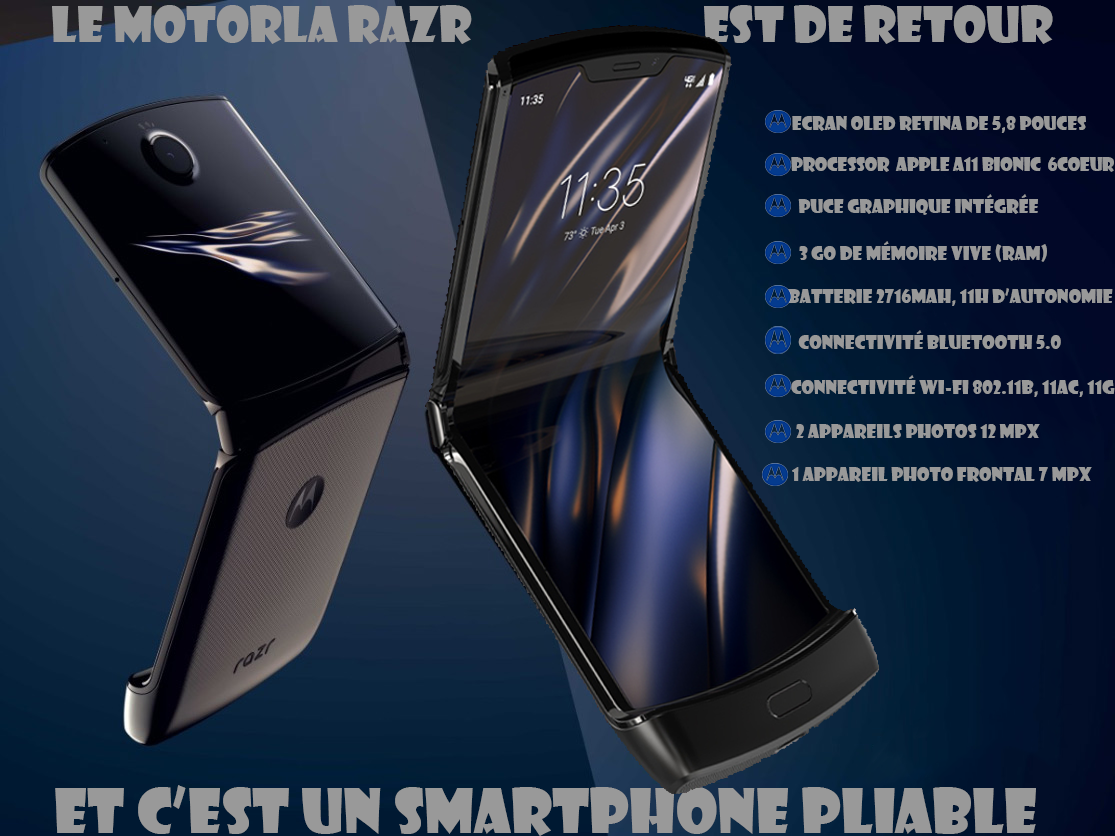
<style>
.page{position:relative;width:1115px;height:836px}
.page>*{position:absolute;margin:0}
.t1{font:48px "ShowcardGothic-Reg";color:#999999}
.t2{font:18px "ShowcardGothic-Reg";color:#999999}
.t3{font:17.6px "ShowcardGothic-Reg";color:#999999}
.t4{font:60px "ShowcardGothic-Reg";color:#999999}
</style>
<div class="page">
<p class="t1" style="left:52px;top:5px;width:1001px;height:39px">Le Motorla RAZR                        est de retour</p>
<p class="t2" style="left:792px;top:116px;width:294px;height:17px">ecran OLED retina de 5,8 pouces</p>
<p class="t3" style="left:791px;top:157px;width:323px;height:15px">Processor  apple A11 BIONIC  6COEUR</p>
<p class="t2" style="left:798px;top:194px;width:240px;height:21px">Puce graphique intégrée</p>
<p class="t2" style="left:799px;top:241px;width:248px;height:21px">3 Go de mémoire vive (RAM)</p>
<p class="t2" style="left:788px;top:288px;width:325px;height:18px">Batterie 2716MAH, 11H D’autonomie</p>
<p class="t2" style="left:798px;top:330px;width:263px;height:19px">Connectivité Bluetooth 5.0</p>
<p class="t2" style="left:791px;top:375px;width:324px;height:22px">Connectivité Wi-Fi 802.11b, 11ac, 11g</p>
<p class="t2" style="left:796px;top:424px;width:244px;height:15px">2 appareils photos 12 Mpx</p>
<p class="t2" style="left:792px;top:467px;width:300px;height:15px">1 appareil photo frontal 7 Mpx</p>
<p class="t4" style="left:55px;top:785px;width:981px;height:51px">et c’est un smartphone pliable</p>
</div>
